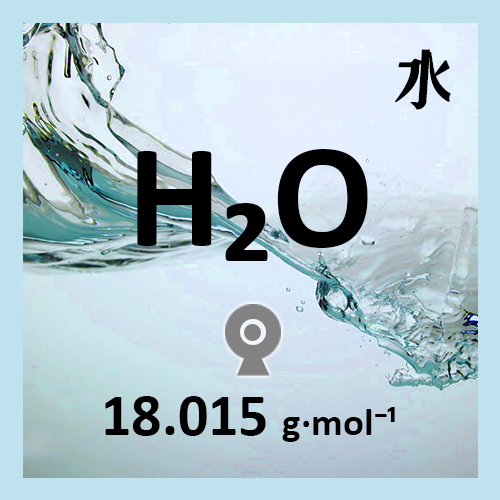
<style>
.page{position:relative;width:500px;height:500px}
.page>*{position:absolute;margin:0}
.t1{font:60px "ZoomlaShuaisongA028";color:#000000;font-weight:bold;scale:0.93 1}
.t2{font:150px "Calibri-Bold";color:#000000}
.t3{font:39px "Calibri-Bold";color:#000000}
.t4{font:60px "Calibri-Bold";color:#000000}
</style>
<div class="page">
<p class="t1" style="left:395px;top:49px;width:56px;height:61px">水</p>
<p class="t2" style="left:137px;top:149px;width:231px;height:112px">H₂O</p>
<p class="t3" style="left:105px;top:396px;width:290px;height:46px"><span class="t4">18.015 </span>g·mol⁻¹</p>
</div>
